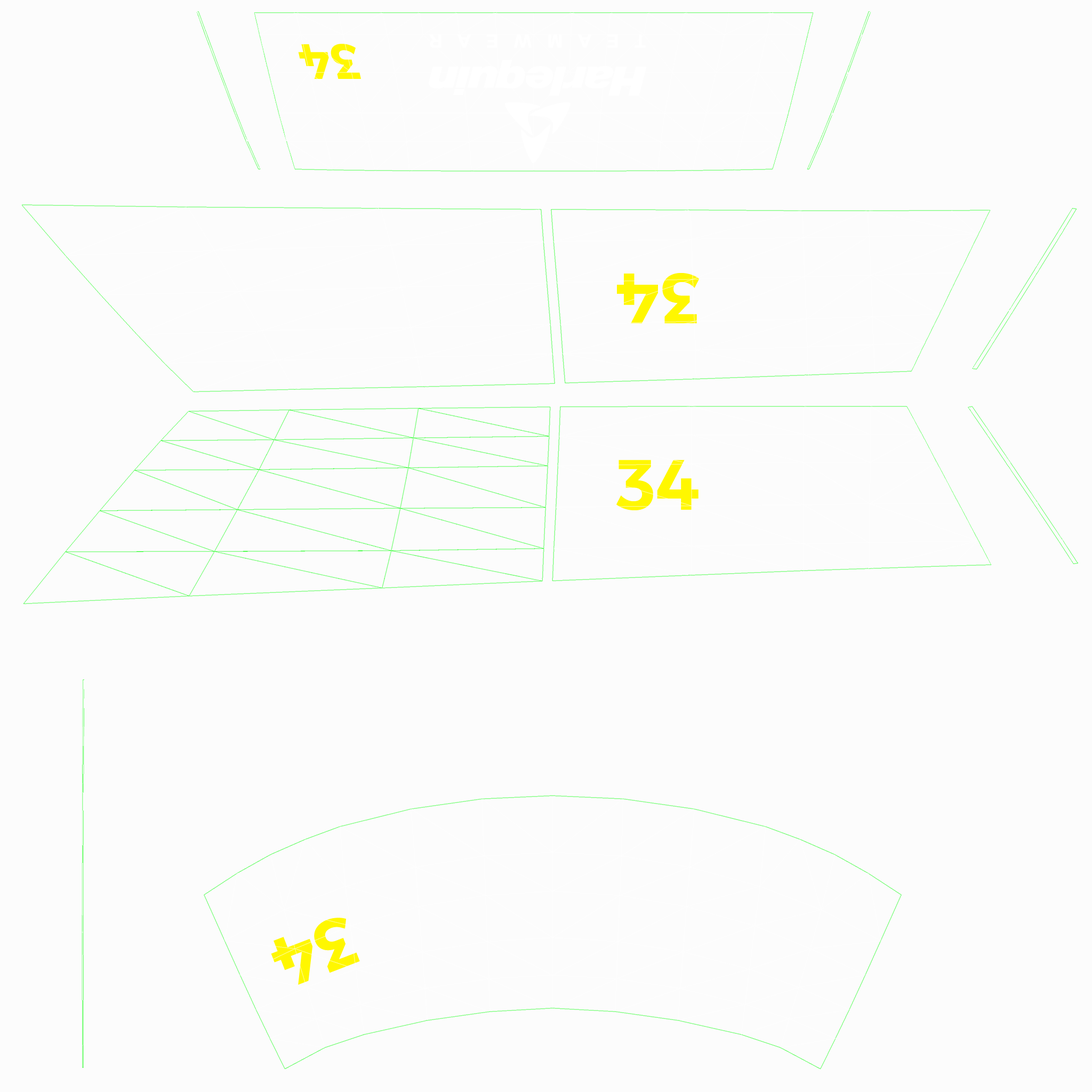
<style>
.page{position:relative;width:1092px;height:1092px;background:#fcfcfc}
.page>*{position:absolute;margin:0}
.t1{font:50.9px "TruenoSBd";color:#fff700}
.t2{font:71.1px "TruenoSBd";color:#fff700}
</style>
<div class="page">
<p class="t1" style="left:298px;top:44px;width:63px;height:35px;rotate:-180deg">34</p>
<p class="t2" style="left:617px;top:273px;width:83px;height:51px;rotate:180deg">34</p>
<p class="t2" style="left:616px;top:460px;width:82px;height:50px">34</p>
<p class="t2" style="left:271px;top:918px;width:89px;height:67px;rotate:159deg">34</p>
</div>
